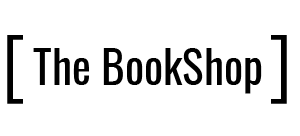
<style>
.page{position:relative;width:300px;height:136px;background:#ffffff}
.page>*{position:absolute;margin:0}
.t1{font:86.1px "MyriadPro-Regular";color:#000000}
.t2{font:44.9px "Oswald-Regular";color:#000000}
</style>
<div class="page">
<p class="t1" style="left:7px;top:35px;width:16px;height:69px">[</p>
<p class="t1" style="left:271px;top:35px;width:16px;height:69px">]</p>
<p class="t2" style="left:33px;top:48px;width:229px;height:46px">The BookShop</p>
</div>
